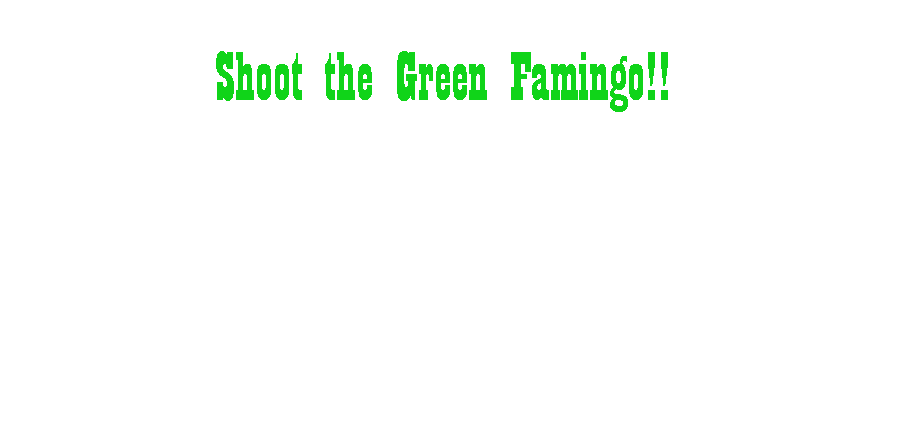
<style>
.page{position:relative;width:900px;height:432px;background:#ffffff}
.page>*{position:absolute;margin:0}
.t1{font:72px "Playbill";color:#10d419}
</style>
<div class="page">
<p class="t1" style="left:216px;top:51px;width:452px;height:61px">Shoot the Green Famingo!!</p>
</div>
